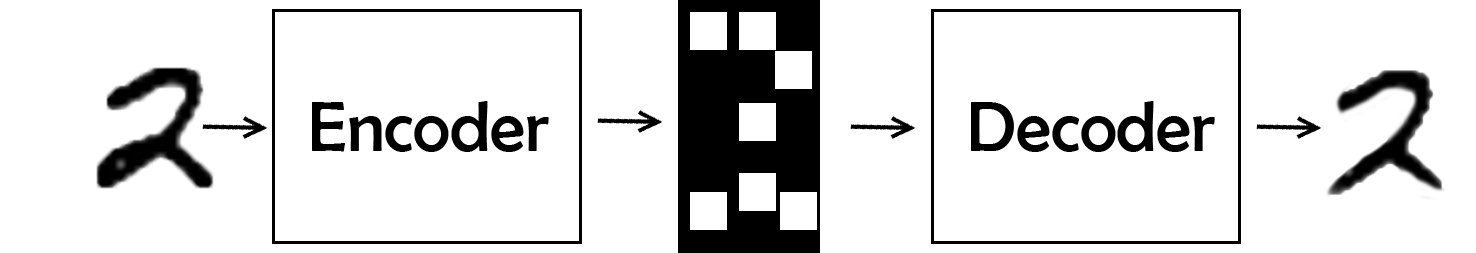
<style>
.page{position:relative;width:1476px;height:253px;background:#ffffff}
.page>*{position:absolute;margin:0}
.t1{font:72px "BerlinSansFB-Reg";color:#000000}
</style>
<div class="page">
<p class="t1" style="left:312px;top:101px;width:237px;height:51px">Encoder</p>
<p class="t1" style="left:971px;top:101px;width:244px;height:51px">Decoder</p>
</div>
